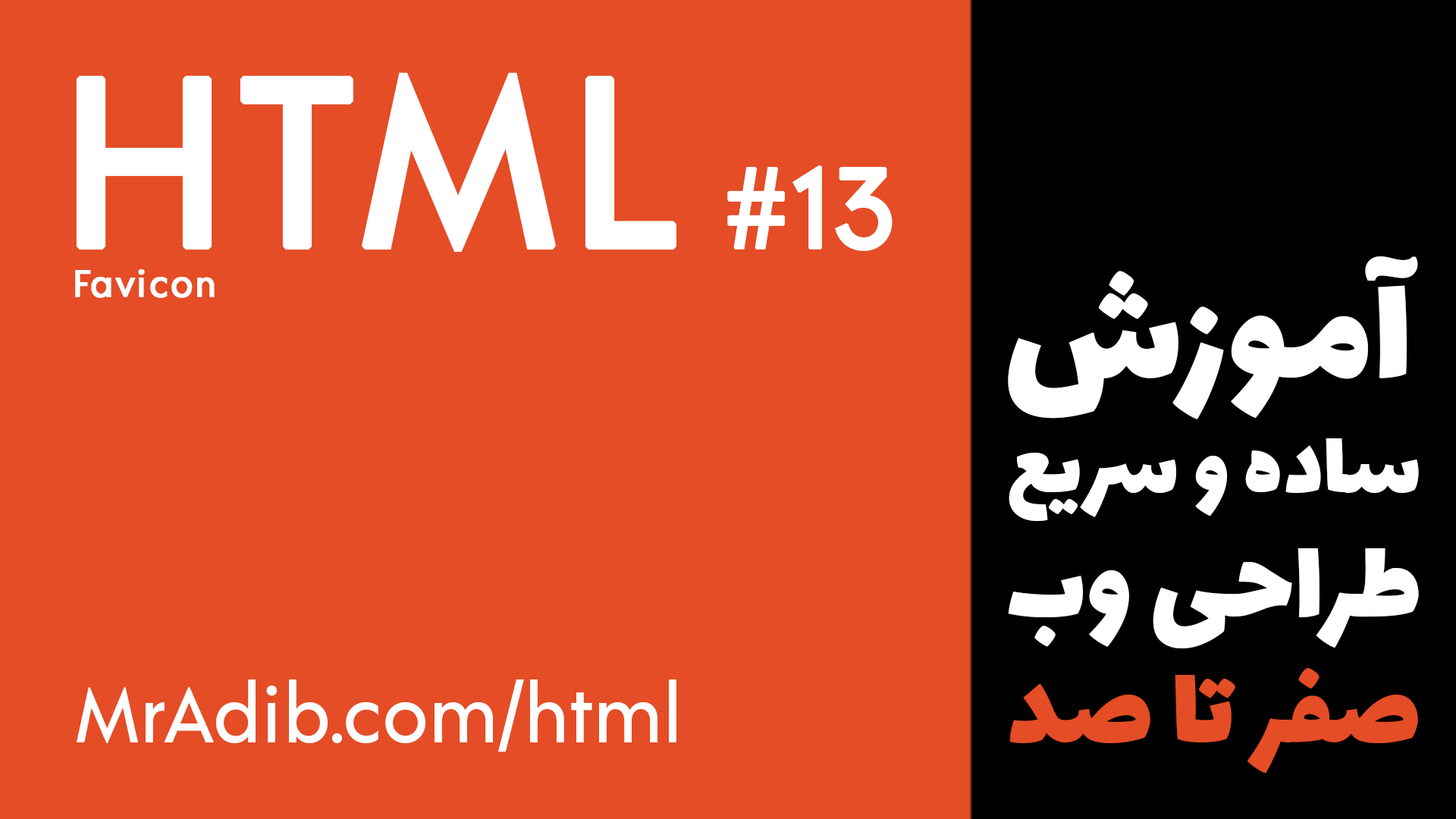
<style>
.page{position:relative;width:1456px;height:819px;background:#e44d26}
.page>*{position:absolute;margin:0}
.t1{font:239.8px "Acre-Medium";letter-spacing:0.025em;color:#ffffff;font-weight:bold}
.t2{font:113.7px "Acre-Medium";color:#ffffff;font-weight:bold}
.t3{font:162.5px "Lalezar-Regular";color:#ffffff}
.t4{font:37.9px "Acre-Medium";letter-spacing:0.025em;color:#ffffff;font-weight:bold}
.t5{font:96.1px "Lalezar-Regular";color:#ffffff}
.t6{font:121.8px "Lalezar-Regular";color:#ffffff}
.t7{font:120.3px "Lalezar-Regular";color:#e44d26}
.t8{font:78.4px "Acre-Medium";color:#ffffff}
</style>
<div class="page">
<p class="t1" style="left:76px;top:72px;width:600px;height:181px">HTML</p>
<p class="t2" style="left:727px;top:165px;width:166px;height:86px">#13</p>
<p class="t3" style="left:1008px;top:256px;width:410px;height:163px">آموزش</p>
<p class="t4" style="left:75px;top:269px;width:140px;height:29px">Favicon</p>
<p class="t5" style="left:1009px;top:438px;width:410px;height:83px">ساده و سریع</p>
<p class="t6" style="left:1008px;top:548px;width:411px;height:100px">طراحی وب</p>
<p class="t7" style="left:1009px;top:668px;width:409px;height:105px">صفر تا صد</p>
<p class="t8" style="left:77px;top:679px;width:599px;height:73px">MrAdib.com/html</p>
</div>
